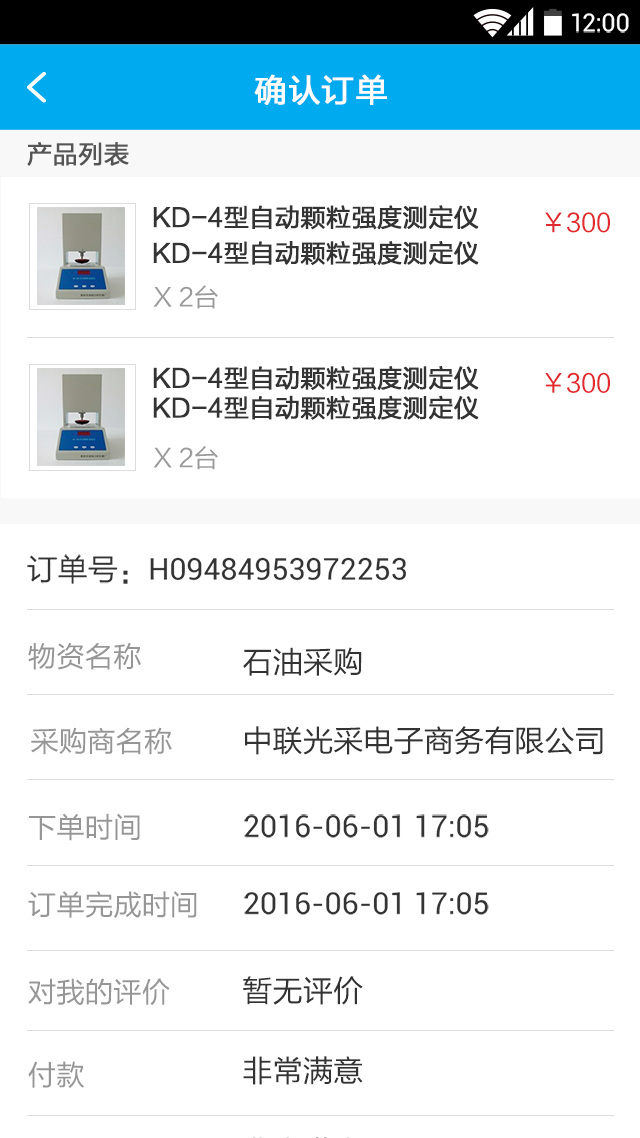
<style>
.page{position:relative;width:640px;height:1138px;background:#ffffff}
.page>*{position:absolute;margin:0}
.t1{font:24.9px "Roboto-Regular";color:#ffffff}
.t2{font:32px "FZLTHJW--GB1-0";letter-spacing:0.02em;color:#ffffff;font-weight:bold}
.t3{font:24.9px "FZLTHJW--GB1-0";color:#555555;font-weight:bold}
.t4{font:24.9px/35.6px "FZLTHJW--GB1-0";color:#333333;font-weight:bold}
.t5{font:24.9px "FZLTHJW--GB1-0";color:#e1292e}
.t6{font:24.9px "FZLTHJW--GB1-0";color:#9b9b9b}
.t7{font:24.9px "FZLTHJW--GB1-0";color:#333333;font-weight:bold}
.t8{font:30.2px "Roboto-Regular";color:#333333}
.t9{font:30.2px "FZLTHJW--GB1-0";color:#333333}
.t10{font:28.4px "FZLTHJW--GB1-0";color:#969696}
</style>
<div class="page">
<p class="t1" style="left:572px;top:13px;width:57px;height:20px">12:00</p>
<p class="t2" style="left:254px;top:74px;width:133px;height:31px">确认订单</p>
<p class="t3" style="left:27px;top:142px;width:102px;height:24px">产品列表</p>
<p class="t4" style="left:153px;top:205px;width:326px;height:60px">KD-4型自动颗粒强度测定仪<br>KD-4型自动颗粒强度测定仪</p>
<p class="t5" style="left:545px;top:212px;width:65px;height:21px">￥300</p>
<p class="t6" style="left:153px;top:285px;width:65px;height:24px">X 2台</p>
<p class="t7" style="left:153px;top:366px;width:326px;height:54px">KD-4型自动颗粒强度测定仪<br>KD-4型自动颗粒强度测定仪</p>
<p class="t5" style="left:545px;top:372px;width:65px;height:21px">￥300</p>
<p class="t6" style="left:153px;top:446px;width:65px;height:24px">X 2台</p>
<p class="t8" style="left:27px;top:554px;width:379px;height:30px"><span class="t9">订单号：</span>H09484953972253</p>
<p class="t10" style="left:28px;top:643px;width:113px;height:27px">物资名称</p>
<p class="t9" style="left:243px;top:647px;width:119px;height:29px">石油采购</p>
<p class="t9" style="left:245px;top:726px;width:358px;height:29px">中联光采电子商务有限公司</p>
<p class="t10" style="left:31px;top:727px;width:141px;height:28px">采购商名称</p>
<p class="t10" style="left:29px;top:813px;width:111px;height:28px">下单时间</p>
<p class="t8" style="left:244px;top:814px;width:245px;height:24px">2016-06-01 17:05</p>
<p class="t10" style="left:28px;top:891px;width:169px;height:27px">订单完成时间</p>
<p class="t8" style="left:244px;top:892px;width:245px;height:23px">2016-06-01 17:05</p>
<p class="t9" style="left:243px;top:976px;width:120px;height:29px">暂无评价</p>
<p class="t10" style="left:28px;top:978px;width:142px;height:27px">对我的评价</p>
<p class="t10" style="left:28px;top:1061px;width:56px;height:27px">付款</p>
<p class="t9" style="left:243px;top:1056px;width:120px;height:29px">非常满意</p>
</div>
